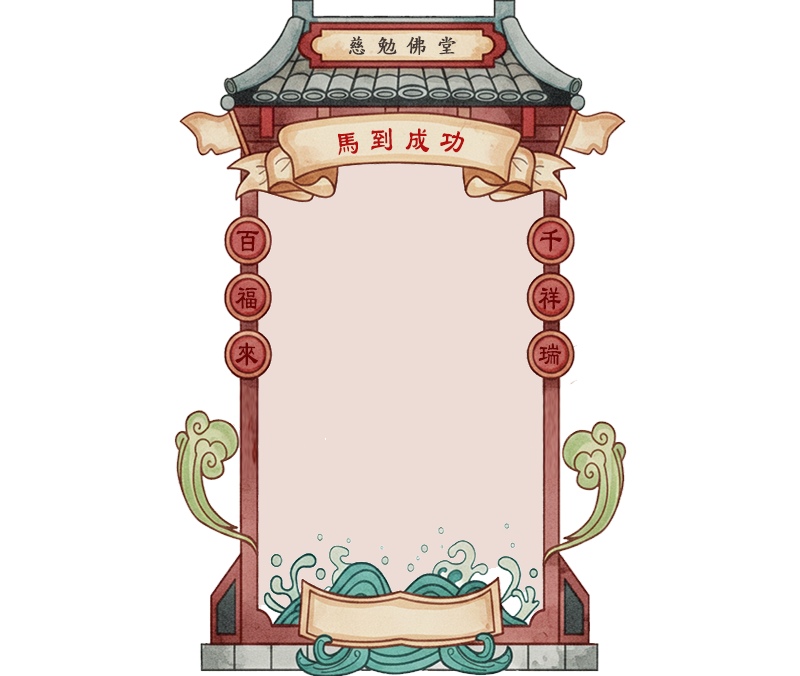
<style>
.page{position:relative;width:800px;height:676px;background:#ffffff}
.page>*{position:absolute;margin:0}
.t1{font:21px "DFKaiShu-SB-Estd-BF";letter-spacing:0.4em;color:#443834;font-weight:bold}
.t2{font:36px "LiSu";letter-spacing:0.4em;color:#b51010;scale:0.67 1}
.t3{font:36px "LiSu";letter-spacing:0.4em;color:#680404;scale:0.67 1}
</style>
<div class="page">
<p class="t1" style="left:349px;top:36px;width:107px;height:19px">慈勉佛堂</p>
<p class="t2" style="left:338px;top:128px;width:127px;height:27px">馬到成功</p>
<p class="t3" style="left:236px;top:230px;width:24px;height:22px">百</p>
<p class="t3" style="left:539px;top:229px;width:23px;height:23px">千</p>
<p class="t3" style="left:235px;top:287px;width:22px;height:22px">福</p>
<p class="t3" style="left:538px;top:287px;width:23px;height:23px">祥</p>
<p class="t3" style="left:235px;top:342px;width:23px;height:24px">來</p>
<p class="t3" style="left:538px;top:343px;width:24px;height:23px">瑞</p>
</div>
